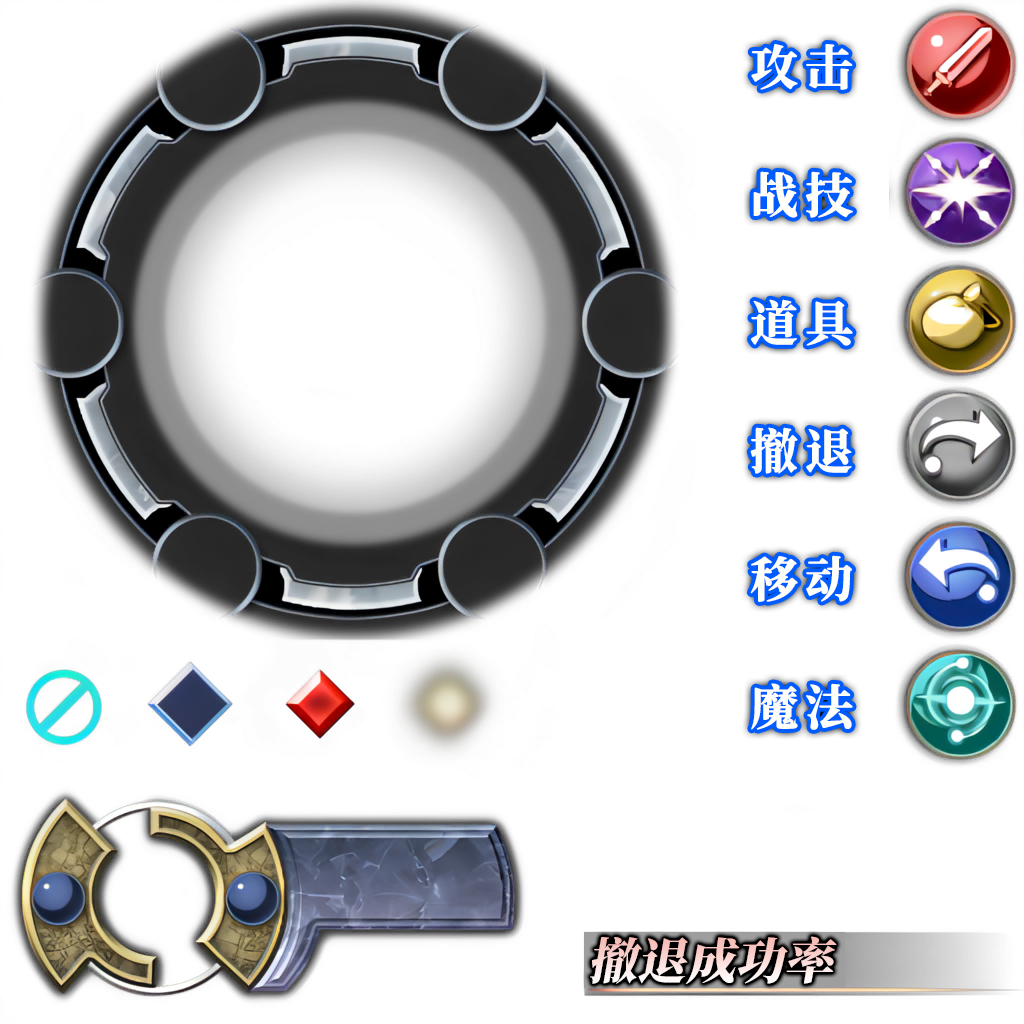
<style>
.page{position:relative;width:1024px;height:1024px;background:#ffffff}
.page>*{position:absolute;margin:0}
.t1{font:48px "ChillJinshuSongHeavy";letter-spacing:0.15em;color:#fffffa}
.t2{font:49px "SourceHanSerifCN-Heavy";font-style:italic}
</style>
<div class="page">
<p class="t1" style="left:751px;top:44px;width:102px;height:46px">攻击</p>
<p class="t1" style="left:753px;top:171px;width:100px;height:47px">战技</p>
<p class="t1" style="left:751px;top:299px;width:102px;height:47px">道具</p>
<p class="t1" style="left:750px;top:427px;width:102px;height:47px">撤退</p>
<p class="t1" style="left:750px;top:555px;width:102px;height:47px">移动</p>
<p class="t1" style="left:751px;top:683px;width:102px;height:47px">魔法</p>
<p class="t2" style="left:590px;top:936px;width:247px;height:49px">撤退成功率</p>
</div>
